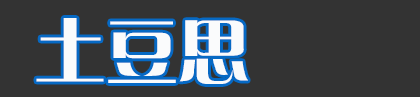
<style>
.page{position:relative;width:420px;height:97px;background:#333333}
.page>*{position:absolute;margin:0}
.t1{font:72px "FZCQK--GBK1-0";color:#fafbfc}
</style>
<div class="page">
<p class="t1" style="left:36px;top:18px;width:212px;height:66px">土豆思</p>
</div>
